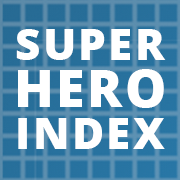
<style>
.page{position:relative;width:180px;height:180px;background:#ffffff}
.page>*{position:absolute;margin:0}
.t1{font:44px/37px "OpenSans-Extrabold";letter-spacing:0.05em;color:#ffffff;text-transform:uppercase}
.t2{font:52px/41px "OpenSans-Extrabold";letter-spacing:0.05em;color:#ffffff;text-transform:uppercase}
</style>
<div class="page">
<p class="t1" style="left:16px;top:29px;width:150px;height:120px;text-align:center">Super<br><span class="t2">hero<br></span>index</p>
</div>
